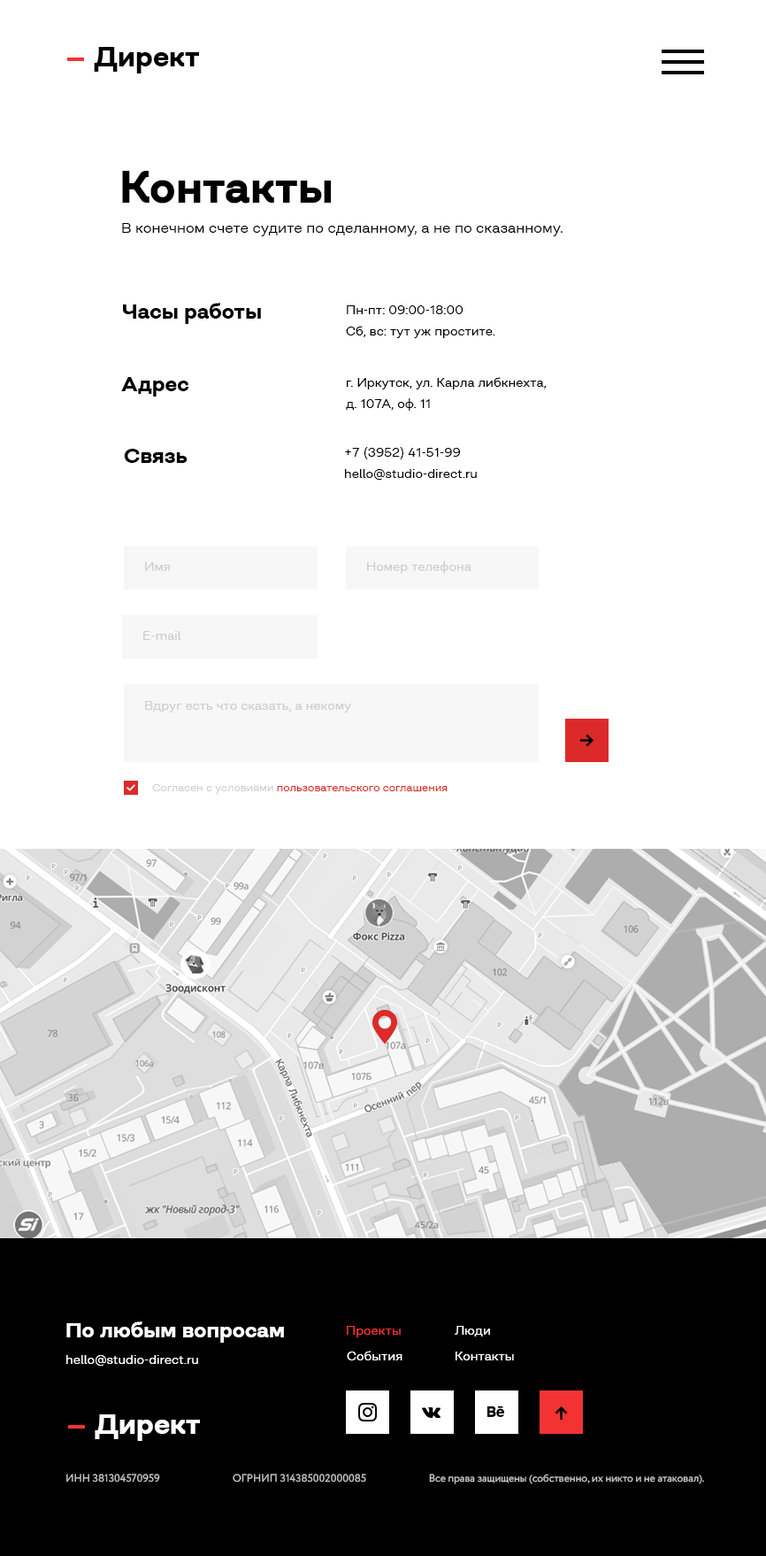
<style>
.page{position:relative;width:766px;height:1556px;background:#ffffff}
.page>*{position:absolute;margin:0}
.t1{font:28.3px "Closer-Bold";color:#000000}
.t2{font:44.3px "Closer-Bold";color:#000000}
.t3{font:14.2px "Closer-Regular";color:#000000}
.t4{font:21.2px "Closer-Bold";color:#000000}
.t5{font:12.4px/21.2px "Closer-Regular";color:#000000}
.t6{font:12.4px "Closer-Regular";color:#cecdcd}
.t7{font:10.6px "Closer-Regular";color:#dc2a2a}
.t8{font:10.6px "Closer-Regular";color:#d0d0d0}
.t9{font:21.2px "Closer-Bold";color:#ffffff}
.t10{font:12.4px "Closer-Regular";color:#f33333}
.t11{font:12.4px "Closer-Regular";color:#ffffff}
.t12{font:28.3px "Closer-Bold";color:#ffffff}
.t13{font:10.6px "Circe-Regular";color:#c8c8c8}
</style>
<div class="page">
<p class="t1" style="left:94px;top:47px;width:105px;height:26px">Директ</p>
<p class="t2" style="left:122px;top:171px;width:210px;height:33px">Контакты</p>
<p class="t3" style="left:122px;top:223px;width:441px;height:13px">В конечном счете судите по сделанному, а не по сказанному.</p>
<p class="t4" style="left:123px;top:303px;width:138px;height:21px">Часы работы</p>
<p class="t5" style="left:346px;top:305px;width:150px;height:33px">Пн-пт: 09:00-18:00<br>Сб, вс: тут уж простите.</p>
<p class="t4" style="left:121px;top:377px;width:68px;height:19px">Адрес</p>
<p class="t5" style="left:346px;top:377px;width:200px;height:34px">г. Иркутск, ул. Карла либкнехта,<br>д. 107А, оф. 11</p>
<p class="t4" style="left:124px;top:449px;width:64px;height:14px">Связь</p>
<p class="t5" style="left:345px;top:447px;width:132px;height:33px">+7 (3952) 41-51-99<br>hello@studio-direct.ru</p>
<p class="t6" style="left:145px;top:562px;width:25px;height:9px">Имя</p>
<p class="t6" style="left:367px;top:561px;width:105px;height:12px">Номер телефона</p>
<p class="t6" style="left:143px;top:631px;width:38px;height:9px">E-mail</p>
<p class="t6" style="left:145px;top:701px;width:206px;height:11px">Вдруг есть что сказать, а некому</p>
<p class="t7" style="left:152px;top:784px;width:296px;height:10px"><span class="t8">Согласен с условиями </span>пользовательского соглашения</p>
<p class="t9" style="left:66px;top:1321px;width:218px;height:22px">По любым вопросам</p>
<p class="t9" style="left:66px;top:1321px;width:218px;height:22px">По любым вопросам</p>
<p class="t10" style="left:347px;top:1326px;width:54px;height:11px">Проекты</p>
<p class="t11" style="left:455px;top:1326px;width:35px;height:10px">Люди</p>
<p class="t11" style="left:66px;top:1355px;width:132px;height:11px">hello@studio-direct.ru</p>
<p class="t11" style="left:66px;top:1355px;width:132px;height:11px">hello@studio-direct.ru</p>
<p class="t11" style="left:347px;top:1351px;width:56px;height:9px">События</p>
<p class="t11" style="left:456px;top:1351px;width:58px;height:9px">Контакты</p>
<p class="t12" style="left:95px;top:1414px;width:105px;height:27px">Директ</p>
<p class="t12" style="left:95px;top:1414px;width:105px;height:27px">Директ</p>
<p class="t13" style="left:66px;top:1474px;width:94px;height:8px">ИНН 381304570959</p>
<p class="t13" style="left:233px;top:1474px;width:133px;height:8px">ОГРНИП 314385002000085</p>
<p class="t13" style="left:429px;top:1474px;width:275px;height:10px">Все права защищены (собственно, их никто и не атаковал).</p>
</div>
